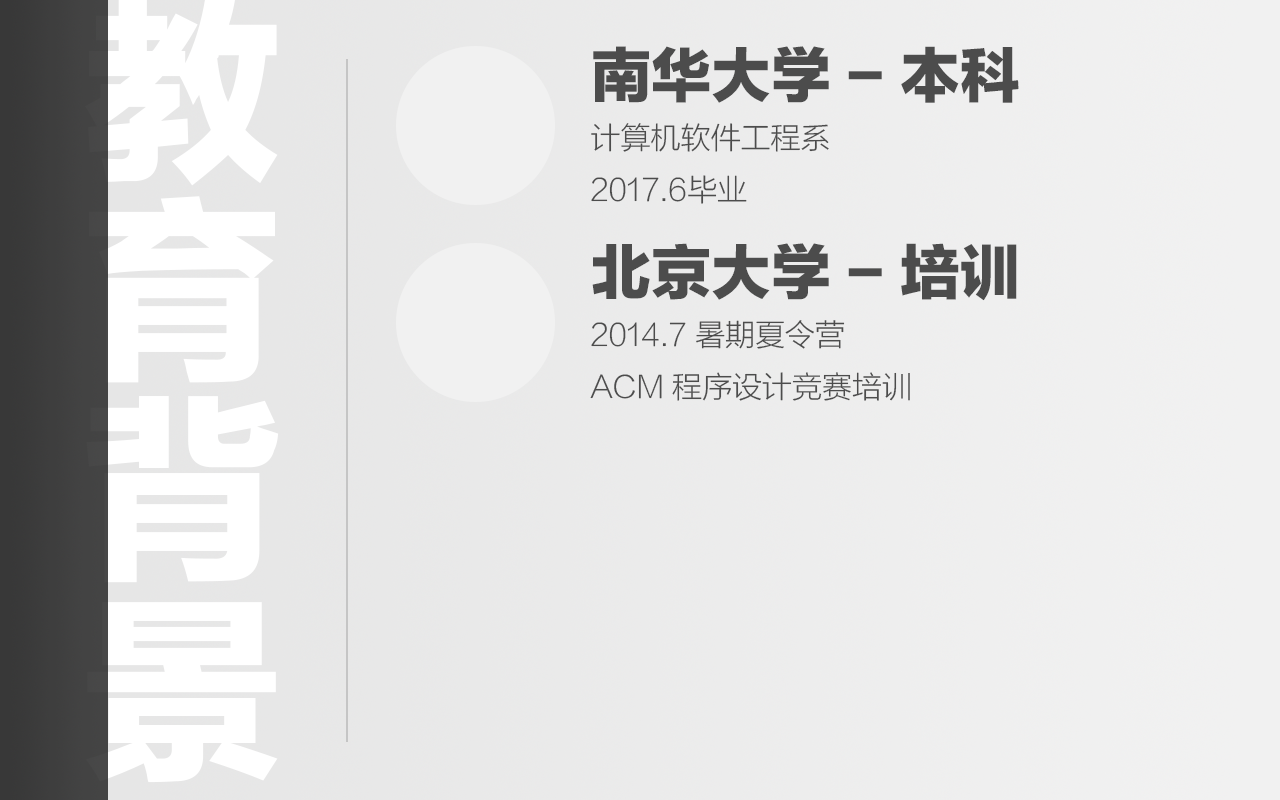
<style>
.page{position:relative;width:1280px;height:800px}
.page>*{position:absolute;margin:0}
.t1{font:60px "FZLTTHK--GBK1-0";color:#4c4c4c}
.t2{font:30px "FZLTXHK--GBK1-0";color:#4c4c4c}
</style>
<div class="page">
<p class="t1" style="left:593px;top:46px;width:426px;height:57px">南华大学 - 本科</p>
<p class="t2" style="left:591px;top:123px;width:238px;height:81px">计算机软件工程系<br>2017.6毕业</p>
<p class="t1" style="left:592px;top:243px;width:425px;height:58px">北京大学 - 培训</p>
<p class="t2" style="left:590px;top:320px;width:320px;height:81px">2014.7 暑期夏令营<br>ACM 程序设计竞赛培训</p>
</div>
